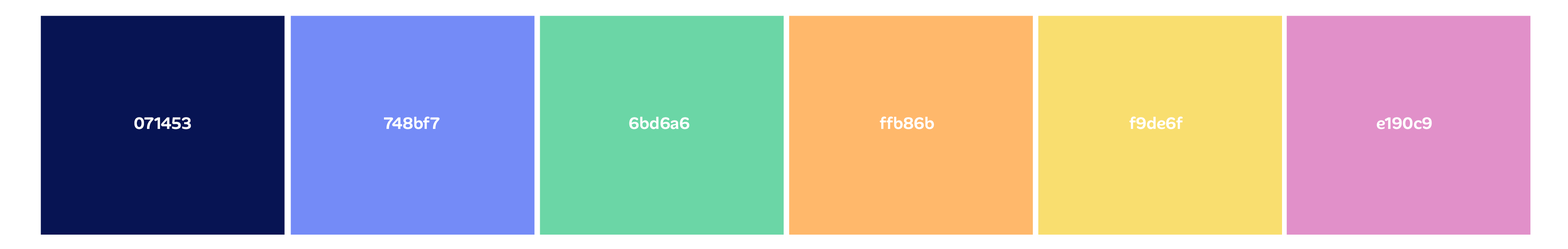
<style>
.page{position:relative;width:1568px;height:249px}
.page>*{position:absolute;margin:0}
.t1{font:16.9px "AlanSans-SemiBold";color:#ffffff}
</style>
<div class="page">
<p class="t1" style="left:134px;top:117px;width:57px;height:12px">071453</p>
<p class="t1" style="left:384px;top:116px;width:56px;height:13px">748bf7</p>
<p class="t1" style="left:629px;top:117px;width:60px;height:12px">6bd6a6</p>
<p class="t1" style="left:879px;top:116px;width:55px;height:13px">ffb86b</p>
<p class="t1" style="left:1129px;top:116px;width:54px;height:13px">f9de6f</p>
<p class="t1" style="left:1377px;top:117px;width:55px;height:12px">e190c9</p>
</div>
